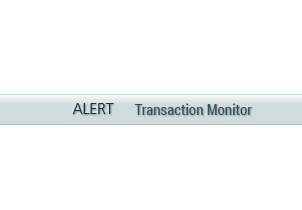
<style>
.page{position:relative;width:302px;height:210px;background:#ffffff}
.page>*{position:absolute;margin:0}
.t1{font:15px "RobotoCondensed-Regular";color:#2f4f56}
</style>
<div class="page">
<p class="t1" style="left:134px;top:103px;width:118px;height:12px">Transaction Monitor</p>
</div>
